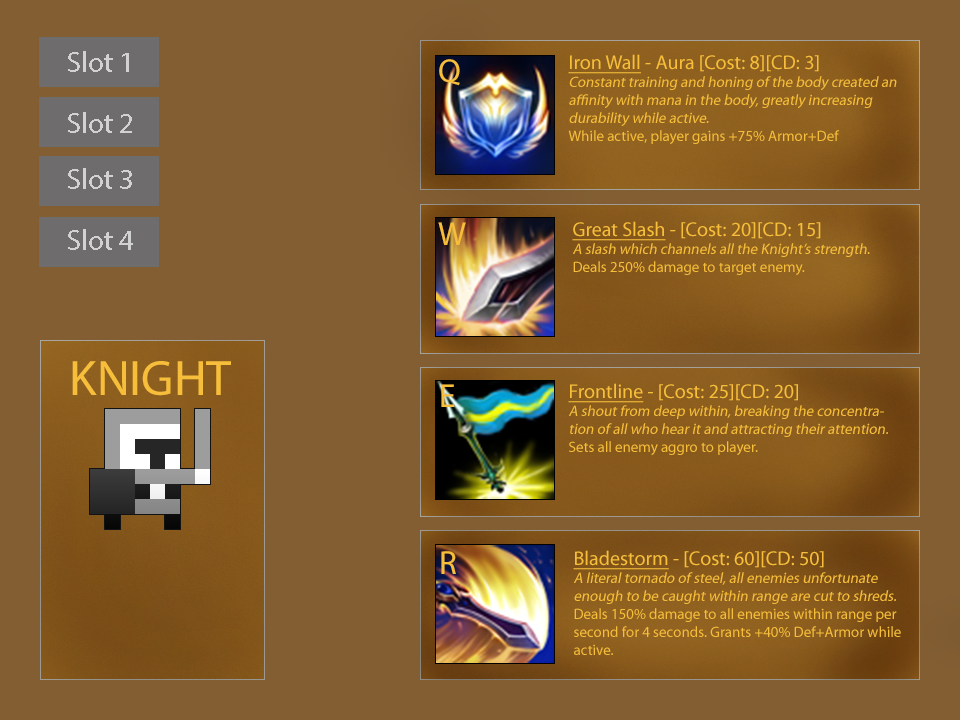
<style>
.page{position:relative;width:960px;height:720px;background:#835e33}
.page>*{position:absolute;margin:0}
.t1{font:29.2px "MyriadPro-Regular";color:#d2d2d2}
.t2{font:125px "MyriadPro-Regular";color:#ffffff}
.t3{font:15px "MyriadPro-Regular";color:#f6be3a;font-style:italic}
.t4{font:20px "MyriadPro-Regular";color:#f6be3a;text-decoration:underline}
.t5{font:20px "MyriadPro-Regular";color:#f6be3a}
.t6{font:15px "MyriadPro-Regular";color:#f6be3a}
.t7{font:33.2px "MyriadPro-Regular";color:#f6be3a}
.t8{font:50px "MyriadPro-Regular";color:#f6be3a}
</style>
<div class="page">
<p class="t1" style="left:68px;top:51px;width:61px;height:21px;text-align:center">Slot 1<br><span class="t2">hERO</span></p>
<p class="t3" style="left:568px;top:54px;width:329px;height:90px"><span class="t4">Iron Wall</span><span class="t5"> - Aura [Cost: 8][CD: 3]<br></span>Constant training and honing of the body created an affinity with mana in the body, greatly increasing durability while active.<br><span class="t6">While active, player gains +75% Armor+Def</span></p>
<p class="t7" style="left:439px;top:59px;width:21px;height:27px">Q</p>
<p class="t1" style="left:68px;top:112px;width:64px;height:21px;text-align:center">Slot 2<br><span class="t2">hERO</span></p>
<p class="t1" style="left:68px;top:168px;width:64px;height:21px;text-align:center">Slot 3<br><span class="t2">hERO</span></p>
<p class="t7" style="left:438px;top:222px;width:28px;height:23px">W</p>
<p class="t3" style="left:572px;top:221px;width:298px;height:54px"><span class="t4">Great Slash</span><span class="t5"> - [Cost: 20][CD: 15]<br></span>A slash which channels all the Knight’s strength.<br><span class="t6">Deals 250% damage to target enemy.</span></p>
<p class="t1" style="left:68px;top:229px;width:65px;height:21px;text-align:center">Slot 4<br><span class="t2">hERO</span></p>
<p class="t8" style="left:72px;top:361px;width:159px;height:35px">KNIGHT</p>
<p class="t7" style="left:441px;top:384px;width:14px;height:23px">E</p>
<p class="t3" style="left:568px;top:383px;width:320px;height:72px"><span class="t4">Frontline</span><span class="t5"> - [Cost: 25][CD: 20]<br></span>A shout from deep within, breaking the concentration of all who hear it and attracting their attention.<br><span class="t6">Sets all enemy aggro to player.</span></p>
<p class="t7" style="left:441px;top:551px;width:15px;height:23px">R</p>
<p class="t6" style="left:573px;top:550px;width:328px;height:105px"><span class="t4">Bladestorm</span><span class="t5"> - [Cost: 60][CD: 50]<br></span><span class="t3">A literal tornado of steel, all enemies unfortunate enough to be caught within range are cut to shreds.<br></span>Deals 150% damage to all enemies within range per second for 4 seconds. Grants +40% Def+Armor while active.</p>
</div>
